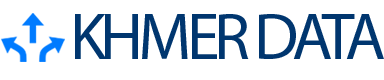
<style>
.page{position:relative;width:384px;height:80px;background:#ffffff}
.page>*{position:absolute;margin:0}
.t1{font:66.1px "MyriadPro-Regular";letter-spacing:-0.075em;color:#00366f;text-transform:uppercase}
</style>
<div class="page">
<p class="t1" style="left:75px;top:14px;width:309px;height:45px">khmer data</p>
</div>
